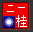
<style>
.page{position:relative;width:33px;height:32px;background:#f20000}
.page>*{position:absolute;margin:0}
.t1{font:10.4px "SimSun";color:#ffffff}
.t2{font:11.7px "SimSun";color:#ffffff}
</style>
<div class="page">
<p class="t1" style="left:7px;top:5px;width:18px;height:7px">二一</p>
<p class="t2" style="left:16px;top:15px;width:11px;height:12px">桂</p>
</div>
